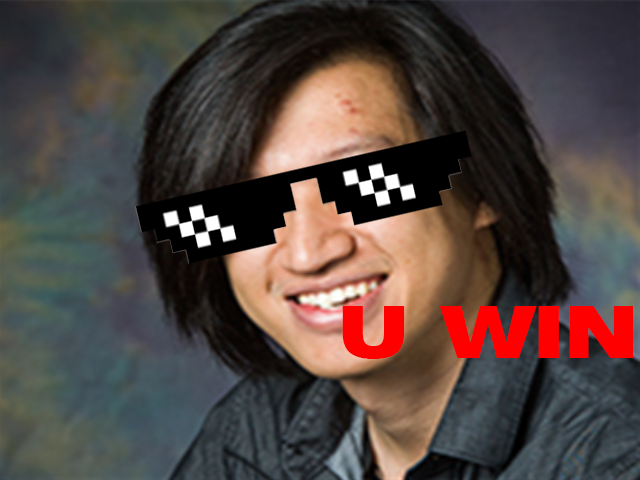
<style>
.page{position:relative;width:640px;height:480px}
.page>*{position:absolute;margin:0}
.t1{font:72px "Swiss721BT-BlackExtended";color:#ff0000}
</style>
<div class="page">
<p class="t1" style="left:342px;top:306px;width:292px;height:53px">U WIN</p>
</div>
